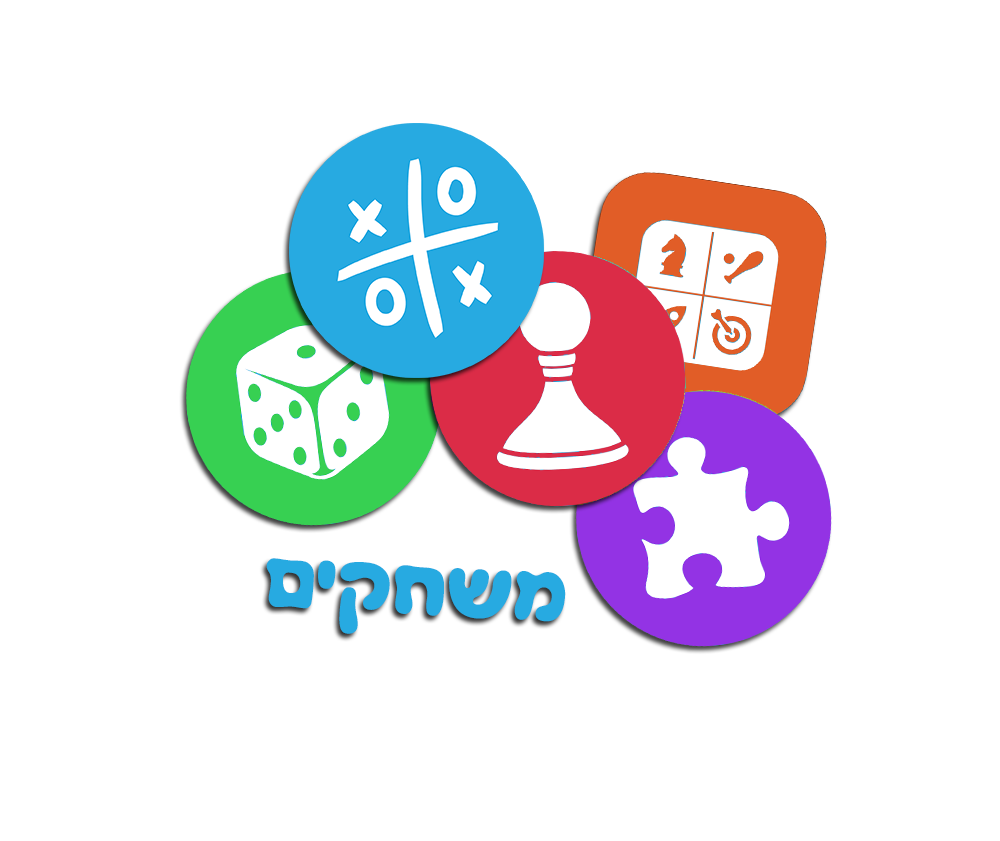
<style>
.page{position:relative;width:1000px;height:841px;background:#ffffff}
.page>*{position:absolute;margin:0}
.t1{font:77.1px "GanCLM-Bold";color:#27aae1}
</style>
<div class="page">
<p class="t1" style="left:266px;top:558px;width:300px;height:76px;rotate:3deg">םיקחשמ</p>
</div>
